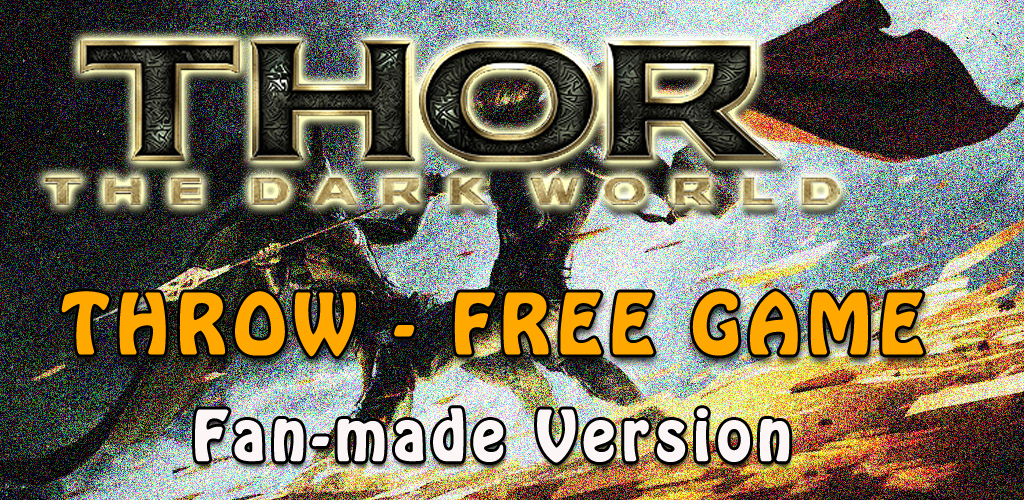
<style>
.page{position:relative;width:1024px;height:500px}
.page>*{position:absolute;margin:0}
.t1{font:72px "HoboStd";letter-spacing:0.1em;color:#ffa800;font-weight:bold}
.t2{font:60px "HoboStd";letter-spacing:0.1em;color:#fdf6f7;font-weight:bold}
</style>
<div class="page">
<p class="t1" style="left:61px;top:291px;width:863px;height:66px">THROW - FREE GAME</p>
<p class="t2" style="left:195px;top:408px;width:595px;height:55px">Fan-made Version</p>
</div>
